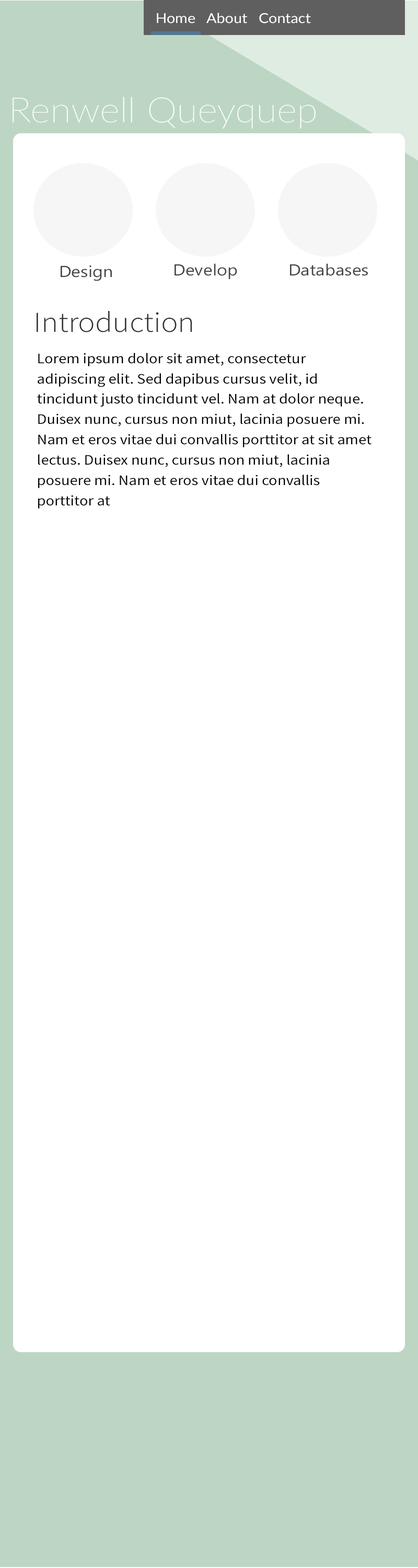
<style>
.page{position:relative;width:418px;height:1568px;background:#ffffff}
.page>*{position:absolute;margin:0}
.t1{font:13.6px "Lato-Regular";color:#ffffff;scale:1.1 1}
.t2{font:34.8px "Lato-Thin";color:#ffffff;scale:1.1 1}
.t3{font:15.9px "Gadugi";color:#444444;scale:1.12 1}
.t4{font:29px "SourceSansPro-Light";color:#323232;scale:1.1 1}
.t5{font:14.5px/20.3px "SourceSansPro-Regular";color:#000000;scale:1.1 1}
</style>
<div class="page">
<p class="t1" style="left:157px;top:13px;width:154px;height:11px">Home   About   Contact</p>
<p class="t2" style="left:13px;top:97px;width:303px;height:32px">Renwell Queyquep</p>
<p class="t3" style="left:61px;top:265px;width:51px;height:16px">Design</p>
<p class="t3" style="left:175px;top:263px;width:62px;height:16px">Develop</p>
<p class="t3" style="left:290px;top:263px;width:78px;height:13px">Databases</p>
<p class="t4" style="left:37px;top:311px;width:155px;height:21px">Introduction</p>
<p class="t5" style="left:37px;top:353px;width:335px;height:156px">Lorem ipsum dolor sit amet, consectetur adipiscing elit. Sed dapibus cursus velit, id tincidunt justo tincidunt vel. Nam at dolor neque. Duisex nunc, cursus non miut, lacinia posuere mi. Nam et eros vitae dui convallis porttitor at sit amet lectus. Duisex nunc, cursus non miut, lacinia posuere mi. Nam et eros vitae dui convallis porttitor at</p>
</div>
